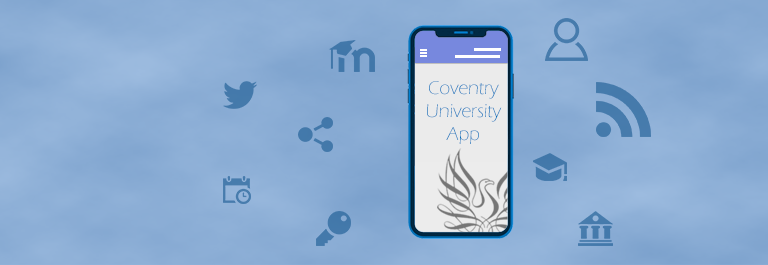
<style>
.page{position:relative;width:768px;height:265px}
.page>*{position:absolute;margin:0}
.t1{font:18.9px "ErasITC-Light";color:#0072bc}
</style>
<div class="page">
<p class="t1" style="left:427px;top:81px;width:75px;height:63px;text-align:center">Coventry<br>University<br>App</p>
</div>
